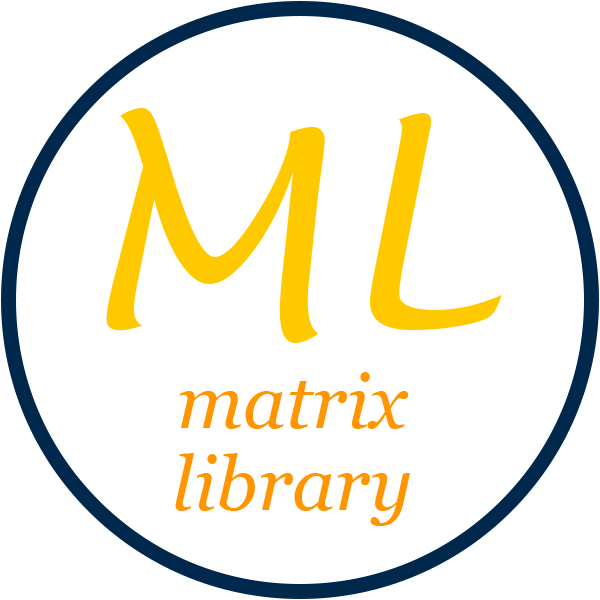
<style>
.page{position:relative;width:600px;height:600px;background:#ffffff}
.page>*{position:absolute;margin:0}
.t1{font:266.7px "LucidaHandwriting-Italic";letter-spacing:0.015em;color:#ffc900}
.t2{font:75px/50px "Georgia-Italic";color:#ff9600}
</style>
<div class="page">
<p class="t1" style="left:106px;top:108px;width:396px;height:235px">ML</p>
<p class="t2" style="left:175px;top:372px;width:235px;height:154px;text-align:center">matrix<br>library</p>
</div>
